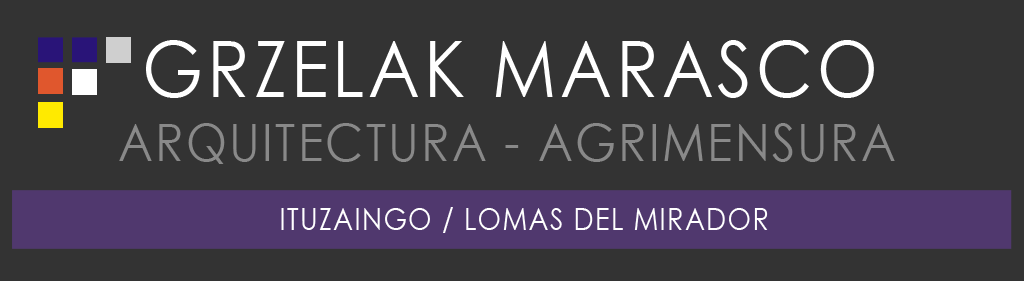
<style>
.page{position:relative;width:1024px;height:281px;background:#333333}
.page>*{position:absolute;margin:0}
.t1{font:78.2px "CenturyGothic";letter-spacing:0.05em;color:#ffffff;text-transform:uppercase;scale:0.9 1}
.t2{font:52.1px "CenturyGothic";letter-spacing:0.05em;color:#898989;text-transform:uppercase;scale:0.9 1}
.t3{font:30px "CenturyGothic";letter-spacing:0.05em;color:#ffffff;text-transform:uppercase;scale:0.9 1}
</style>
<div class="page">
<p class="t1" style="left:146px;top:40px;width:728px;height:58px">GRZELAK MARASCO</p>
<p class="t2" style="left:119px;top:123px;width:776px;height:41px">ARQUITECTURA - AGRIMENSURA</p>
<p class="t3" style="left:281px;top:207px;width:487px;height:26px">ITUZAINGO / LOMAS DEL MIRADOR</p>
</div>
